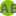
<style>
.page{position:relative;width:16px;height:16px;background:#82c300}
.page>*{position:absolute;margin:0}
.t1{font:13.3px "MyriadPro-Bold";color:#656565;scale:1.11 1}
</style>
<div class="page">
<p class="t1" style="left:0px;top:4px;width:18px;height:9px">AB</p>
</div>
